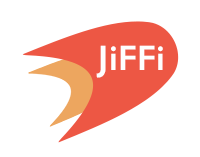
<style>
.page{position:relative;width:200px;height:157px;background:#ffffff}
.page>*{position:absolute;margin:0}
.t1{font:35.5px "GillSans-SemiBold";color:#fefefe}
</style>
<div class="page">
<p class="t1" style="left:96px;top:45px;width:67px;height:33px">JiFFi</p>
</div>
